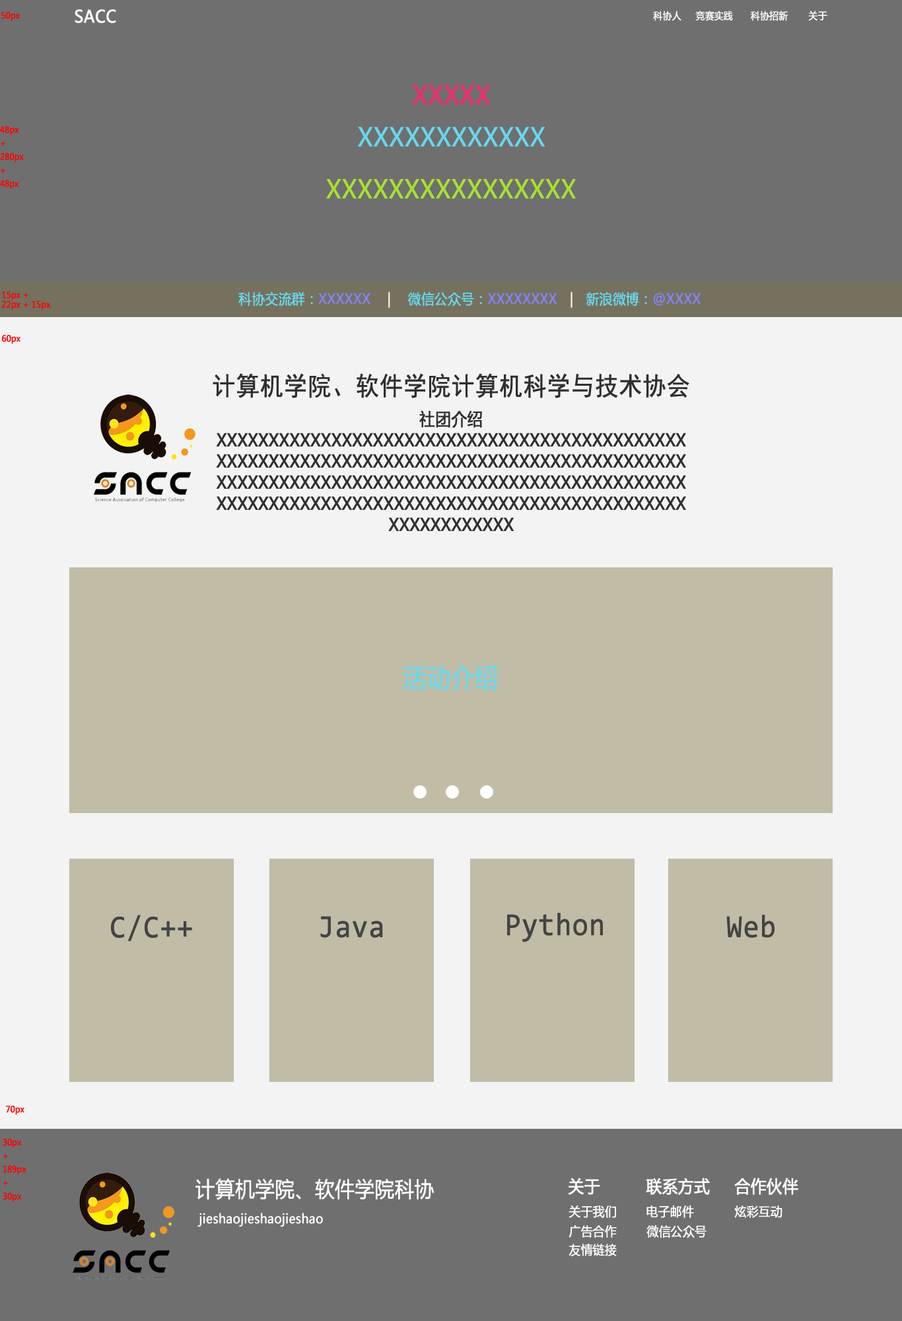
<style>
.page{position:relative;width:902px;height:1321px;background:#6f6f6f}
.page>*{position:absolute;margin:0}
.t1{font:8.5px "MicrosoftYaHei";color:#fe0000;font-weight:bold;scale:0.92 1}
.t2{font:17px "MicrosoftYaHei";color:#fffefe;font-weight:bold;scale:0.92 1}
.t3{font:9.9px "MicrosoftYaHei";color:#fefefe;font-weight:bold;scale:0.92 1}
.t4{font:9.9px "MicrosoftYaHei";color:#ffffff;font-weight:bold;scale:0.92 1}
.t5{font:25.4px "MicrosoftYaHei";color:#f92672;font-weight:bold;scale:0.92 1}
.t6{font:25.4px "MicrosoftYaHei";color:#66d9ef;font-weight:bold;scale:0.92 1}
.t7{font:25.4px "MicrosoftYaHei";color:#a6e22e;font-weight:bold;scale:0.92 1}
.t8{font:8.6px/9.9px "MicrosoftYaHei";color:#fe0000;font-weight:bold;scale:0.91 1}
.t9{font:14.1px "MicrosoftYaHei";color:#8481ff;font-weight:bold;scale:0.92 1}
.t10{font:14.1px "MicrosoftYaHei";color:#66d9ef;font-weight:bold;scale:0.92 1}
.t11{font:14.1px "MicrosoftYaHei";color:#fefefe;font-weight:bold;scale:0.92 1}
.t12{font:14.1px "MicrosoftYaHei";color:#ffffff;font-weight:bold;scale:0.92 1}
.t13{font:8.6px "MicrosoftYaHei";color:#fe0000;font-weight:bold;scale:0.91 1}
.t14{font:25.7px "SimHei";color:#302f2f;font-weight:bold;scale:0.91 1}
.t15{font:17.1px/21.1px "MicrosoftYaHei";color:#302f2f;font-weight:bold;scale:0.91 1}
.t16{font:25.7px "MicrosoftYaHei";color:#66d9ef;font-weight:bold;scale:0.91 1}
.t17{font:32.1px "Consolas";color:#434343;font-weight:bold;scale:0.91 1}
.t18{font:8.5px "MicrosoftYaHei";color:#ff0000;font-weight:bold;scale:0.92 1}
.t19{font:21.2px "MicrosoftYaHei";color:#fefefe;font-weight:bold;scale:0.92 1}
.t20{font:17px "MicrosoftYaHei";color:#ffffff;font-weight:bold;scale:0.92 1}
.t21{font:17px "MicrosoftYaHei";color:#fefeff;font-weight:bold;scale:0.92 1}
.t22{font:12.7px "MicrosoftYaHei";color:#fefeff;font-weight:bold;scale:0.92 1}
.t23{font:12.7px "MicrosoftYaHei";color:#ffffff;font-weight:bold;scale:0.92 1}
.t24{font:12.7px "MicrosoftYaHei";color:#fefefe;font-weight:bold;scale:0.92 1}
</style>
<div class="page">
<p class="t1" style="left:1px;top:12px;width:19px;height:9px">50px</p>
<p class="t2" style="left:75px;top:9px;width:41px;height:14px">SACC</p>
<p class="t3" style="left:653px;top:11px;width:29px;height:10px">科协人</p>
<p class="t3" style="left:696px;top:11px;width:37px;height:10px">竞赛实践</p>
<p class="t4" style="left:751px;top:11px;width:38px;height:10px">科协招新</p>
<p class="t4" style="left:809px;top:11px;width:19px;height:10px">关于</p>
<p class="t5" style="left:413px;top:85px;width:77px;height:20px">XXXXX</p>
<p class="t1" style="left:0px;top:126px;width:24px;height:63px">48px  <br>+ <br>280px <br>+ <br>48px</p>
<p class="t6" style="left:358px;top:127px;width:187px;height:20px">XXXXXXXXXXXX</p>
<p class="t7" style="left:326px;top:179px;width:250px;height:20px">XXXXXXXXXXXXXXXX</p>
<p class="t8" style="left:1px;top:291px;width:49px;height:19px">15px + <br>22px + 15px</p>
<p class="t9" style="left:238px;top:291px;width:463px;height:17px"><span class="t10">科协交流群：</span>XXXXXX   <span class="t11"> | </span><span class="t10">   微信公众号：</span>XXXXXXXX   <span class="t12">|   </span><span class="t10">新浪微博：</span>@XXXX</p>
<p class="t13" style="left:2px;top:335px;width:18px;height:9px">60px</p>
<p class="t14" style="left:213px;top:373px;width:477px;height:25px">计算机学院、软件学院计算机科学与技术协会</p>
<p class="t15" style="left:216px;top:410px;width:470px;height:121px;text-align:center">社团介绍XXXXXXXXXXXXXXXXXXXXXXXXXXXXXXXXXXXXXXXXXXXXXXXXXXXXXXXXXXXXXXXXXXXXXXXXXXXXXXXXXXXXXXXXXXXXXXXXXXXXXXXXXXXXXXXXXXXXXXXXXXXXXXXXXXXXXXXXXXXXXXXXXXXXXXXXXXXXXXXXXXXXXXXXXXXXXXXXXXXXXXXXXXXXXXXX</p>
<p class="t16" style="left:403px;top:665px;width:94px;height:26px">活动介绍</p>
<p class="t17" style="left:111px;top:915px;width:81px;height:26px">C/C++</p>
<p class="t17" style="left:320px;top:916px;width:63px;height:22px">Java</p>
<p class="t17" style="left:507px;top:913px;width:96px;height:29px">Python</p>
<p class="t17" style="left:727px;top:915px;width:48px;height:23px">Web</p>
<p class="t13" style="left:5px;top:1106px;width:19px;height:9px">70px</p>
<p class="t18" style="left:3px;top:1139px;width:23px;height:63px">30px <br>+ <br>189px <br>+ <br>30px</p>
<p class="t19" style="left:196px;top:1179px;width:239px;height:21px">计算机学院、软件学院科协</p>
<p class="t20" style="left:568px;top:1178px;width:33px;height:17px">关于</p>
<p class="t20" style="left:646px;top:1178px;width:64px;height:17px">联系方式</p>
<p class="t21" style="left:735px;top:1178px;width:64px;height:17px">合作伙伴</p>
<p class="t22" style="left:569px;top:1206px;width:47px;height:12px">关于我们</p>
<p class="t23" style="left:647px;top:1206px;width:47px;height:12px">电子邮件</p>
<p class="t23" style="left:735px;top:1206px;width:48px;height:12px">炫彩互动</p>
<p class="t24" style="left:198px;top:1213px;width:125px;height:15px">jieshaojieshaojieshao</p>
<p class="t22" style="left:569px;top:1225px;width:48px;height:13px">广告合作</p>
<p class="t23" style="left:647px;top:1225px;width:60px;height:13px">微信公众号</p>
<p class="t22" style="left:569px;top:1243px;width:48px;height:14px">友情链接</p>
</div>
